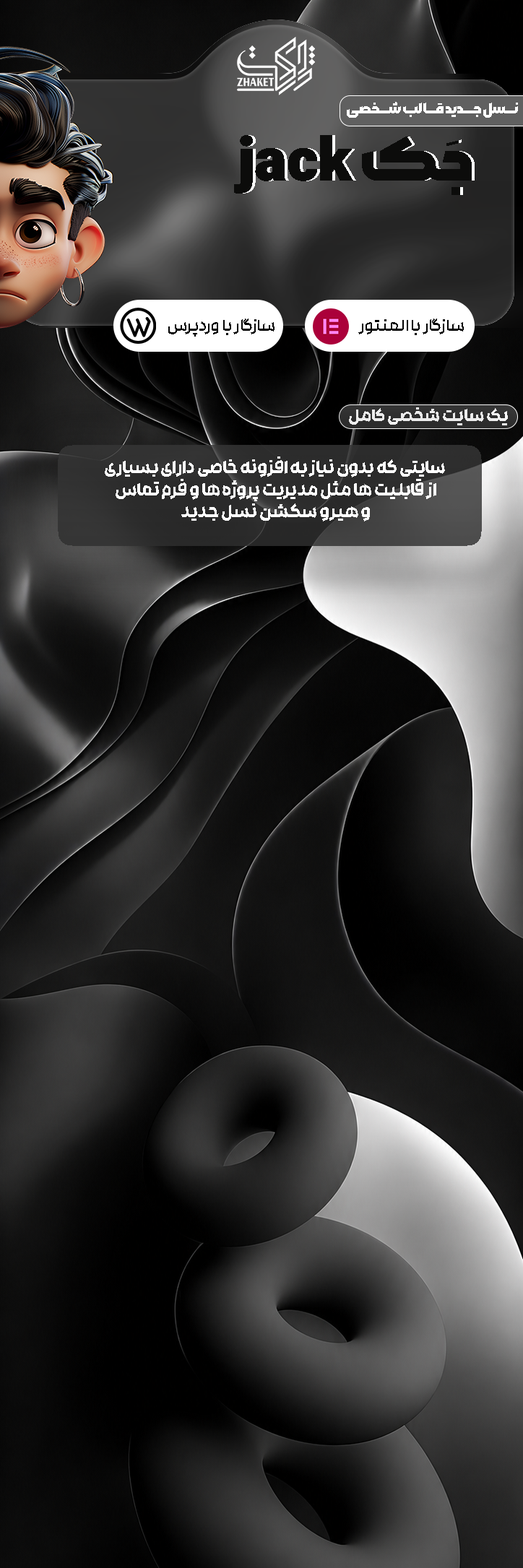
<style>
.page{position:relative;width:523px;height:1568px}
.page>*{position:absolute;margin:0}
.t1{font:14.4px "Morabba-Black";color:#ffffff}
.t2{font:60.4px "Morabba-Black";color:#0c0c0b}
.t3{font:18.1px "Rokh-SemiBold";color:#000000}
.t4{font:18.1px "Rokh-UltraBold";color:#ffffff}
.t5{font:18.5px "Rokh-UltraBold";color:#ffffff}
</style>
<div class="page">
<p class="t1" style="left:347px;top:102px;width:171px;height:16px">نـــسل جـــدید قـــالب شـــخصی</p>
<p class="t2" style="left:234px;top:135px;width:238px;height:60px">jack جَک</p>
<p class="t3" style="left:168px;top:319px;width:106px;height:18px">سازگار با وردپرس</p>
<p class="t3" style="left:358px;top:319px;width:106px;height:16px">سازگار با المنتور</p>
<p class="t4" style="left:349px;top:407px;width:159px;height:18px">یک سایت شخصی کامل</p>
<p class="t5" style="left:105px;top:456px;width:340px;height:65px;text-align:center">سایتی که بدون نیاز به افزونه خاصی دارای بسیاری<br> از قابلیت ها مثل مدیریت پروژه ها و فرم تماس<br> و هیرو سکشن نسل جدید</p>
</div>
